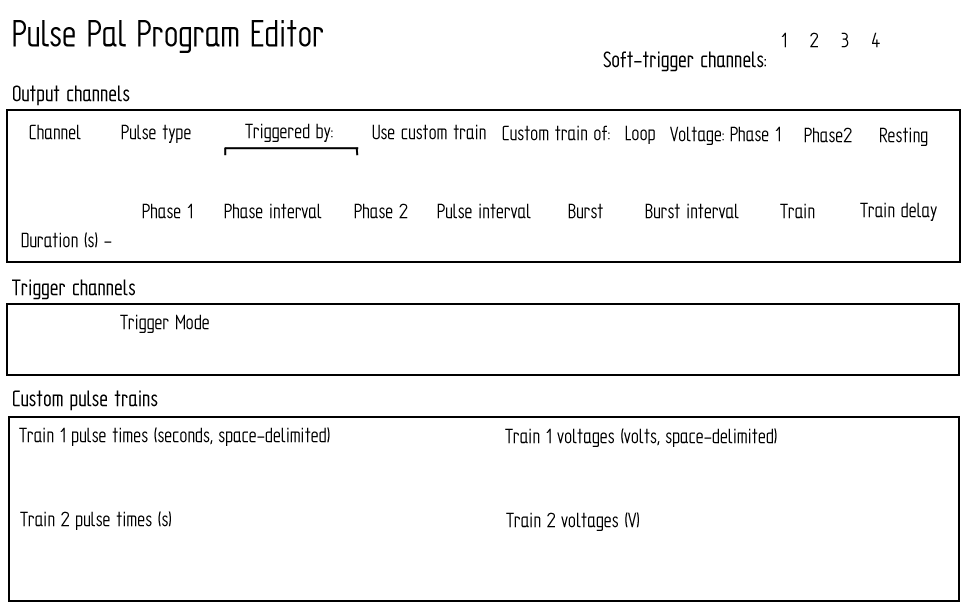
<style>
.page{position:relative;width:970px;height:608px;background:#ffffff}
.page>*{position:absolute;margin:0}
.t1{font:41.7px "SolidEdgeISOBold";color:#000000}
.t2{font:22.9px "SolidEdgeISOBold";color:#000000}
.t3{font:25px "SolidEdgeISOBold";color:#000000}
</style>
<div class="page">
<p class="t1" style="left:13px;top:20px;width:310px;height:33px">Pulse Pal Program Editor</p>
<p class="t2" style="left:781px;top:32px;width:99px;height:16px">1    2    3    4</p>
<p class="t3" style="left:603px;top:51px;width:163px;height:21px">Soft-trigger channels:</p>
<p class="t3" style="left:13px;top:85px;width:117px;height:21px">Output channels</p>
<p class="t2" style="left:29px;top:124px;width:52px;height:16px">Channel</p>
<p class="t2" style="left:121px;top:124px;width:70px;height:19px">Pulse type</p>
<p class="t2" style="left:245px;top:123px;width:88px;height:19px">Triggered by:</p>
<p class="t2" style="left:372px;top:124px;width:114px;height:16px">Use custom train</p>
<p class="t2" style="left:502px;top:125px;width:108px;height:16px">Custom train of:</p>
<p class="t2" style="left:625px;top:125px;width:30px;height:19px">Loop</p>
<p class="t2" style="left:670px;top:126px;width:110px;height:19px">Voltage: Phase 1</p>
<p class="t2" style="left:804px;top:127px;width:48px;height:16px">Phase2</p>
<p class="t2" style="left:880px;top:127px;width:48px;height:19px">Resting</p>
<p class="t2" style="left:142px;top:203px;width:50px;height:16px">Phase 1</p>
<p class="t2" style="left:224px;top:203px;width:98px;height:16px">Phase interval</p>
<p class="t2" style="left:354px;top:203px;width:54px;height:16px">Phase 2</p>
<p class="t2" style="left:437px;top:203px;width:94px;height:16px">Pulse interval</p>
<p class="t2" style="left:568px;top:203px;width:35px;height:16px">Burst</p>
<p class="t2" style="left:645px;top:203px;width:94px;height:16px">Burst interval</p>
<p class="t2" style="left:780px;top:203px;width:35px;height:16px">Train</p>
<p class="t2" style="left:860px;top:202px;width:77px;height:19px">Train delay</p>
<p class="t2" style="left:21px;top:232px;width:91px;height:16px">Duration (s) -</p>
<p class="t3" style="left:12px;top:279px;width:123px;height:21px">Trigger channels</p>
<p class="t2" style="left:120px;top:314px;width:89px;height:19px">Trigger Mode</p>
<p class="t3" style="left:13px;top:390px;width:145px;height:21px">Custom pulse trains</p>
<p class="t2" style="left:19px;top:427px;width:311px;height:19px">Train 1 pulse times (seconds, space-delimited)</p>
<p class="t2" style="left:505px;top:428px;width:272px;height:19px">Train 1 voltages (volts, space-delimited)</p>
<p class="t2" style="left:20px;top:511px;width:151px;height:19px">Train 2 pulse times (s)</p>
<p class="t2" style="left:506px;top:512px;width:133px;height:19px">Train 2 voltages (V)</p>
</div>
